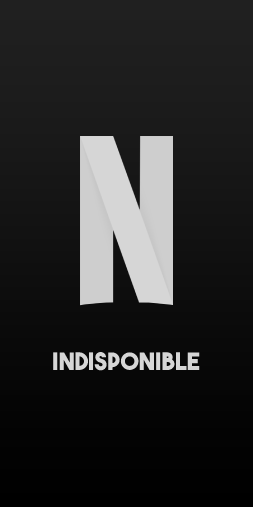
<style>
.page{position:relative;width:253px;height:507px}
.page>*{position:absolute;margin:0}
.t1{font:24px "TheBoldFont";color:#d6d6d6}
</style>
<div class="page">
<p class="t1" style="left:53px;top:351px;width:147px;height:20px">INDISPONIBLE</p>
</div>
